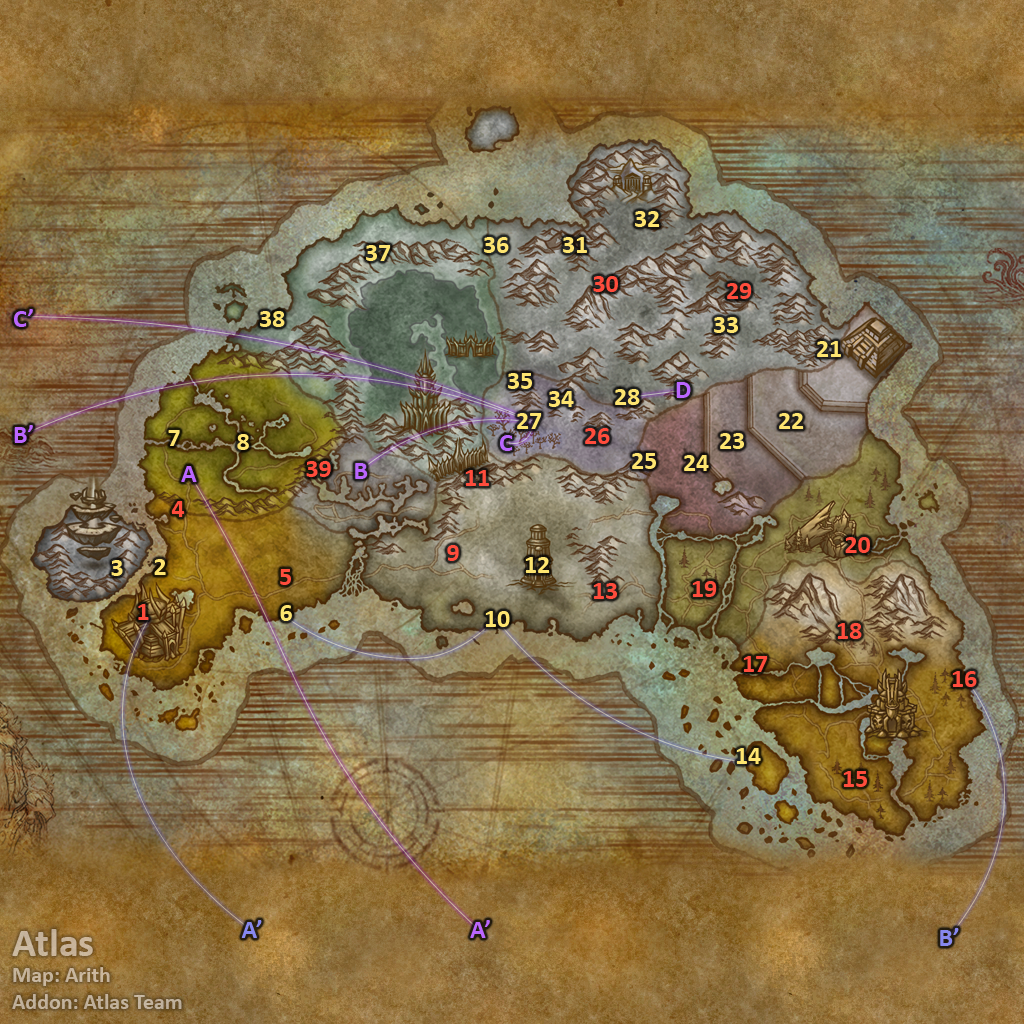
<style>
.page{position:relative;width:1024px;height:1024px}
.page>*{position:absolute;margin:0}
.t1{font:26px "Calibri-Bold";color:#fee570}
.t2{font:26px "Calibri-Bold";color:#ff4c3c}
.t3{font:26px "Calibri-Bold";color:#bb66ff}
.t4{font:22px "Calibri-Bold";color:#c4b39b}
.t5{font:40px "Calibri-Bold";color:#c4b39b}
.t6{font:26px "Calibri-Bold";color:#8788ee}
</style>
<div class="page">
<p class="t1" style="left:635px;top:211px;width:25px;height:16px">32</p>
<p class="t1" style="left:366px;top:245px;width:25px;height:16px">37</p>
<p class="t1" style="left:484px;top:237px;width:25px;height:16px">36</p>
<p class="t1" style="left:563px;top:237px;width:24px;height:16px">31</p>
<p class="t2" style="left:593px;top:276px;width:25px;height:16px">30</p>
<p class="t2" style="left:727px;top:283px;width:25px;height:16px">29</p>
<p class="t3" style="left:14px;top:309px;width:19px;height:18px">C’</p>
<p class="t1" style="left:260px;top:311px;width:25px;height:16px">38</p>
<p class="t1" style="left:714px;top:317px;width:24px;height:16px">33</p>
<p class="t1" style="left:817px;top:341px;width:24px;height:16px">21</p>
<p class="t1" style="left:508px;top:373px;width:24px;height:16px">35</p>
<p class="t1" style="left:615px;top:389px;width:25px;height:16px">28</p>
<p class="t3" style="left:676px;top:382px;width:15px;height:16px">D</p>
<p class="t1" style="left:549px;top:391px;width:25px;height:16px">34</p>
<p class="t1" style="left:517px;top:413px;width:25px;height:16px">27</p>
<p class="t1" style="left:779px;top:413px;width:25px;height:16px">22</p>
<p class="t3" style="left:14px;top:425px;width:19px;height:18px">B’</p>
<p class="t1" style="left:168px;top:430px;width:12px;height:16px">7</p>
<p class="t1" style="left:237px;top:434px;width:12px;height:16px">8</p>
<p class="t3" style="left:500px;top:435px;width:13px;height:16px">C</p>
<p class="t2" style="left:585px;top:428px;width:25px;height:16px">26</p>
<p class="t1" style="left:720px;top:433px;width:24px;height:16px">23</p>
<p class="t2" style="left:306px;top:461px;width:25px;height:16px">39</p>
<p class="t1" style="left:632px;top:453px;width:24px;height:16px">25</p>
<p class="t1" style="left:684px;top:455px;width:25px;height:16px">24</p>
<p class="t3" style="left:181px;top:466px;width:16px;height:16px">A</p>
<p class="t3" style="left:355px;top:463px;width:13px;height:16px">B</p>
<p class="t2" style="left:465px;top:470px;width:24px;height:16px">11</p>
<p class="t2" style="left:171px;top:501px;width:14px;height:16px">4</p>
<p class="t2" style="left:447px;top:545px;width:12px;height:16px">9</p>
<p class="t2" style="left:845px;top:537px;width:25px;height:16px">20</p>
<p class="t1" style="left:525px;top:557px;width:25px;height:16px">12</p>
<p class="t1" style="left:111px;top:560px;width:12px;height:16px">3</p>
<p class="t1" style="left:154px;top:559px;width:12px;height:16px">2</p>
<p class="t2" style="left:280px;top:569px;width:11px;height:16px">5</p>
<p class="t2" style="left:692px;top:581px;width:25px;height:16px">19</p>
<p class="t2" style="left:593px;top:583px;width:24px;height:16px">13</p>
<p class="t2" style="left:138px;top:604px;width:11px;height:16px">1</p>
<p class="t1" style="left:280px;top:605px;width:12px;height:16px">6</p>
<p class="t1" style="left:485px;top:611px;width:25px;height:16px">10</p>
<p class="t2" style="left:837px;top:623px;width:25px;height:16px">18</p>
<p class="t2" style="left:743px;top:656px;width:25px;height:16px">17</p>
<p class="t2" style="left:952px;top:671px;width:25px;height:16px">16</p>
<p class="t1" style="left:736px;top:748px;width:25px;height:16px">14</p>
<p class="t2" style="left:843px;top:771px;width:24px;height:16px">15</p>
<p class="t4" style="left:12px;top:929px;width:170px;height:80px"><span class="t5">Atlas<br></span>Map: Arith<br>Addon: Atlas Team</p>
<p class="t6" style="left:241px;top:920px;width:21px;height:18px">A’</p>
<p class="t3" style="left:470px;top:920px;width:20px;height:18px">A’</p>
<p class="t6" style="left:940px;top:928px;width:19px;height:18px">B’</p>
</div>
